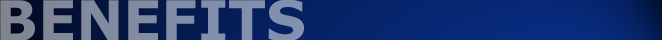
<style>
.page{position:relative;width:662px;height:40px}
.page>*{position:absolute;margin:0}
.t1{font:56px "Verdana-Bold";letter-spacing:-0.005em;color:#818ba2}
</style>
<div class="page">
<p class="t1" style="left:0px;top:0px;width:304px;height:42px">BENEFITS</p>
</div>
